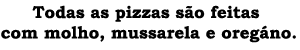
<style>
.page{position:relative;width:300px;height:50px;background:#ffffff}
.page>*{position:absolute;margin:0}
.t1{font:17px "BookmanOldStyle-Bold";color:#000000}
</style>
<div class="page">
<p class="t1" style="left:1px;top:5px;width:295px;height:38px;text-align:center">Todas as pizzas são feitas<br> com molho, mussarela e oregáno.</p>
</div>
